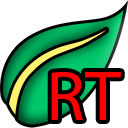
<style>
.page{position:relative;width:128px;height:128px;background:#ffffff}
.page>*{position:absolute;margin:0}
.t1{font:71.6px "MyriadPro-Regular";color:#ff0000}
</style>
<div class="page">
<p class="t1" style="left:51px;top:72px;width:70px;height:48px">RT</p>
</div>
